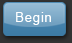
<style>
.page{position:relative;width:72px;height:43px}
.page>*{position:absolute;margin:0}
.t1{font:13.4px "ArialMT";letter-spacing:0.05em;color:#ffffff}
</style>
<div class="page">
<p class="t1" style="left:16px;top:12px;width:35px;height:13px">Begin</p>
</div>
